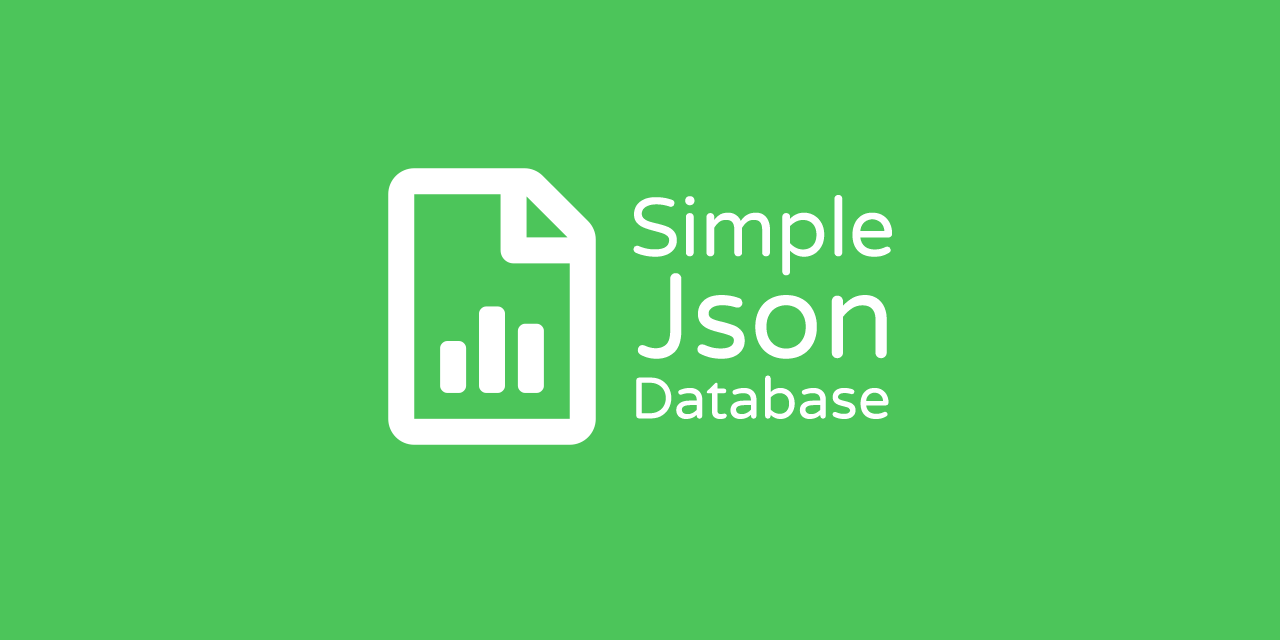
<style>
.page{position:relative;width:1280px;height:640px;background:#4cc55a}
.page>*{position:absolute;margin:0}
.t1{font:82.6px "VarelaRound-Regular";color:#ffffff}
.t2{font:119.7px "VarelaRound-Regular";color:#ffffff}
.t3{font:58.1px "VarelaRound-Regular";color:#ffffff}
</style>
<div class="page">
<p class="t1" style="left:633px;top:195px;width:259px;height:81px">Simple</p>
<p class="t2" style="left:637px;top:273px;width:250px;height:86px">Json</p>
<p class="t3" style="left:636px;top:375px;width:253px;height:44px">Database</p>
</div>
